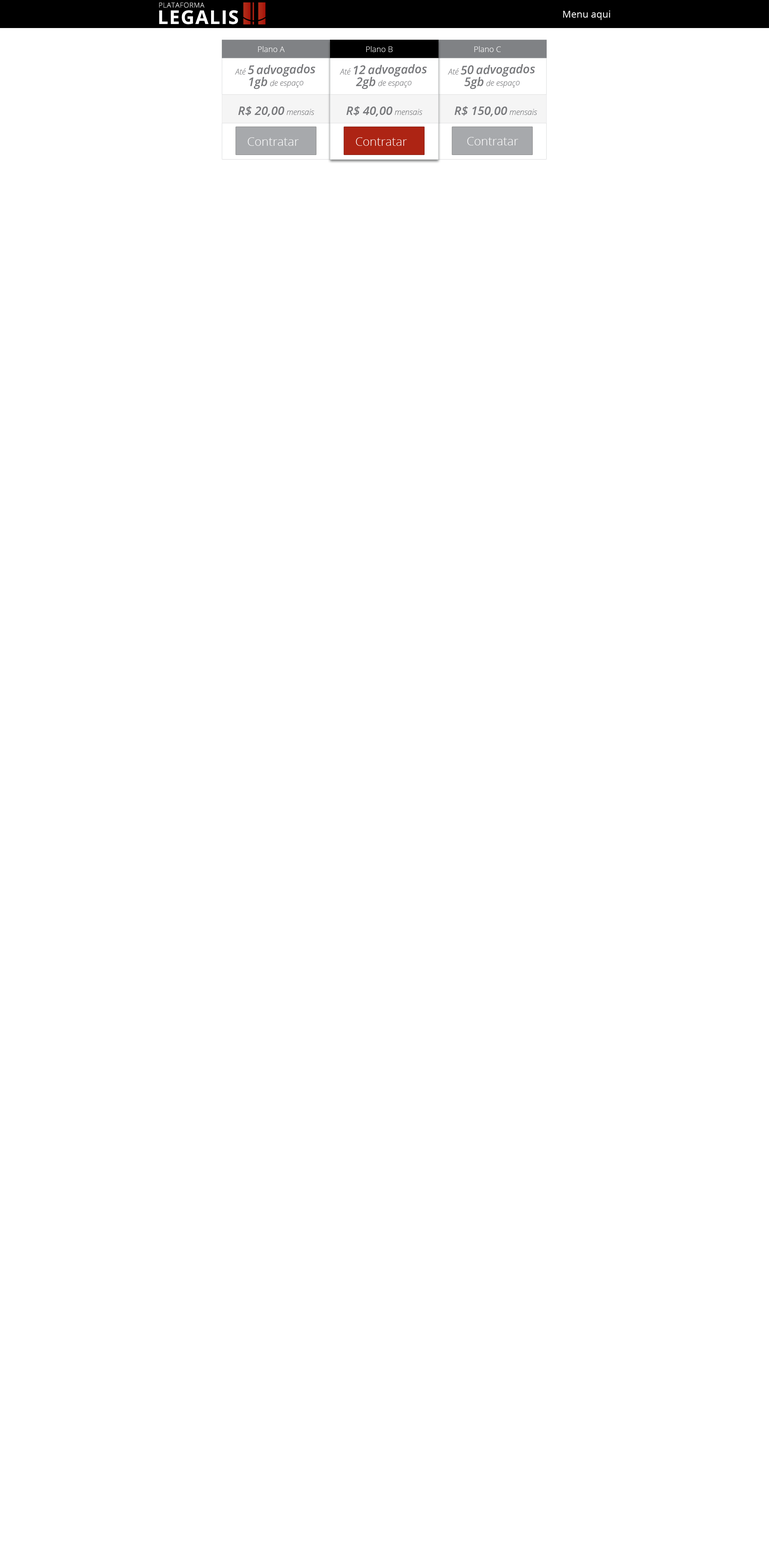
<style>
.page{position:relative;width:769px;height:1550px;background:#ffffff}
.page>*{position:absolute;margin:0}
.t1{font:9.7px "OpenSans";color:#ffffff}
.t2{font:8px "OpenSans-Light";color:#ffffff}
.t3{font:12px/12px "OpenSans-SemiboldItalic";color:#77787b}
.t4{font:8px/12px "OpenSansLight-Italic";color:#77787b}
.t5{font:12px "OpenSans-SemiboldItalic";color:#77787b}
.t6{font:8px "OpenSansLight-Italic";color:#77787b}
.t7{font:12px "OpenSans-Light";color:#ffffff}
</style>
<div class="page">
<p class="t1" style="left:563px;top:10px;width:48px;height:10px">Menu aqui</p>
<p class="t2" style="left:258px;top:46px;width:27px;height:6px">Plano A</p>
<p class="t2" style="left:366px;top:46px;width:27px;height:6px">Plano B</p>
<p class="t2" style="left:474px;top:46px;width:27px;height:6px">Plano C</p>
<p class="t3" style="left:235px;top:64px;width:81px;height:25px;text-align:center;rotate:-1deg"><span class="t4">Até </span>5 advogados<br>1gb<span class="t4"> de espaço</span></p>
<p class="t3" style="left:340px;top:64px;width:87px;height:25px;text-align:center;rotate:-1deg"><span class="t4">Até </span>12 advogados<br>2gb<span class="t4"> de espaço</span></p>
<p class="t3" style="left:448px;top:64px;width:87px;height:25px;text-align:center;rotate:-1deg"><span class="t4">Até </span>50 advogados<br>5gb<span class="t4"> de espaço</span></p>
<p class="t5" style="left:238px;top:106px;width:76px;height:11px">R$ 20,00 <span class="t6">mensais</span></p>
<p class="t5" style="left:347px;top:106px;width:76px;height:11px">R$ 40,00 <span class="t6">mensais</span></p>
<p class="t5" style="left:455px;top:106px;width:82px;height:11px">R$ 150,00 <span class="t6">mensais</span></p>
<p class="t7" style="left:248px;top:137px;width:51px;height:9px">Contratar</p>
<p class="t7" style="left:356px;top:137px;width:51px;height:9px">Contratar</p>
<p class="t7" style="left:467px;top:137px;width:51px;height:8px">Contratar</p>
</div>
